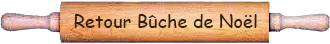
<style>
.page{position:relative;width:330px;height:44px;background:#ffffff}
.page>*{position:absolute;margin:0}
.t1{font:18px "ComicSansMS";letter-spacing:0.005em;color:#2f1d04}
</style>
<div class="page">
<p class="t1" style="left:74px;top:14px;width:183px;height:14px">Retour Bûche de Noël</p>
</div>
